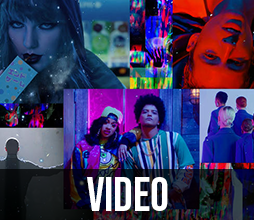
<style>
.page{position:relative;width:254px;height:220px}
.page>*{position:absolute;margin:0}
.t1{font:47.8px "BebasNeue-Regular";color:#ffffff}
</style>
<div class="page">
<p class="t1" style="left:87px;top:177px;width:81px;height:34px">Video</p>
</div>
